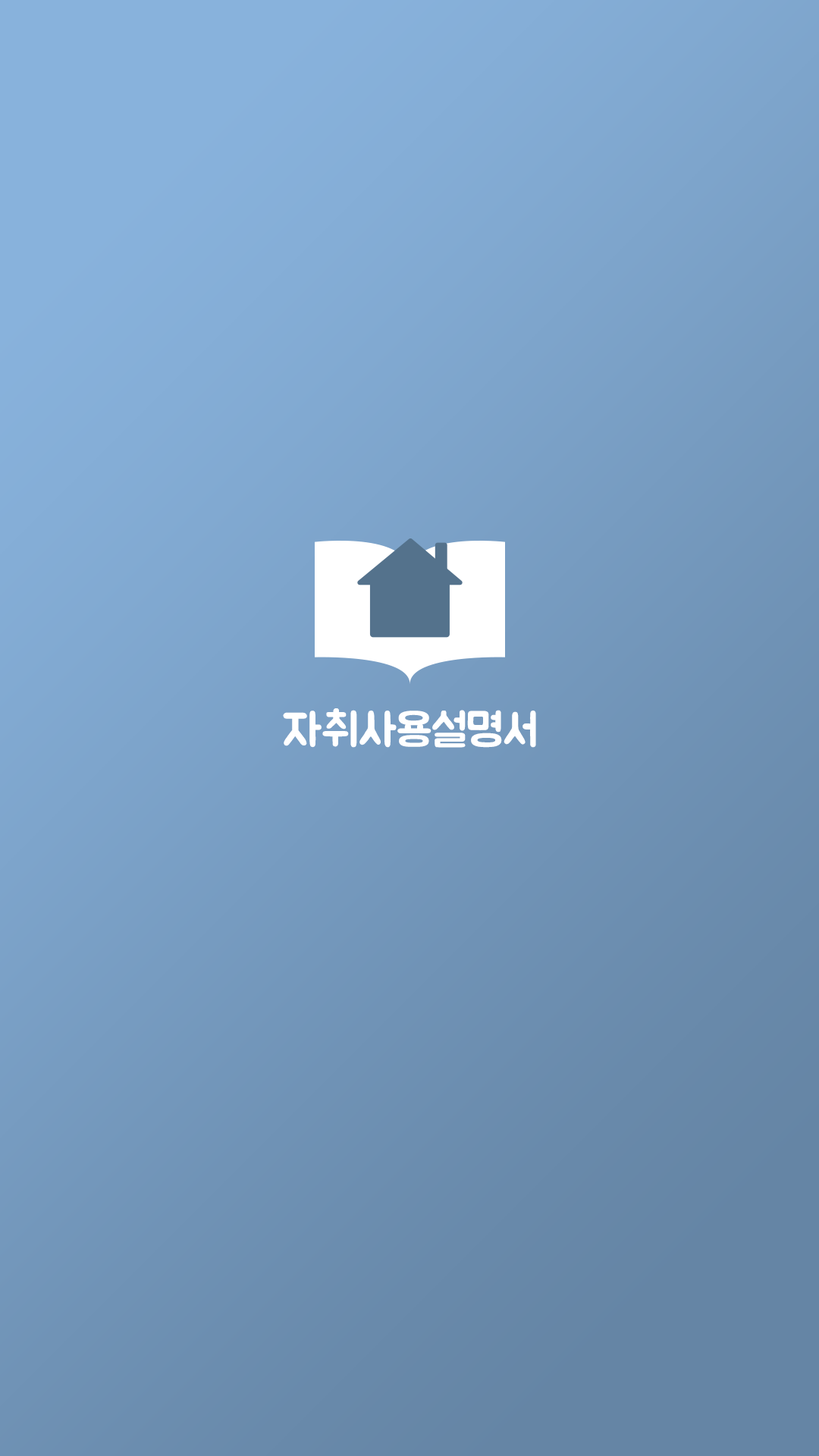
<style>
.page{position:relative;width:819px;height:1456px}
.page>*{position:absolute;margin:0}
.t1{font:45.5px "BMJUA";color:#ffffff}
</style>
<div class="page">
<p class="t1" style="left:283px;top:708px;width:253px;height:40px">자취사용설명서</p>
</div>
